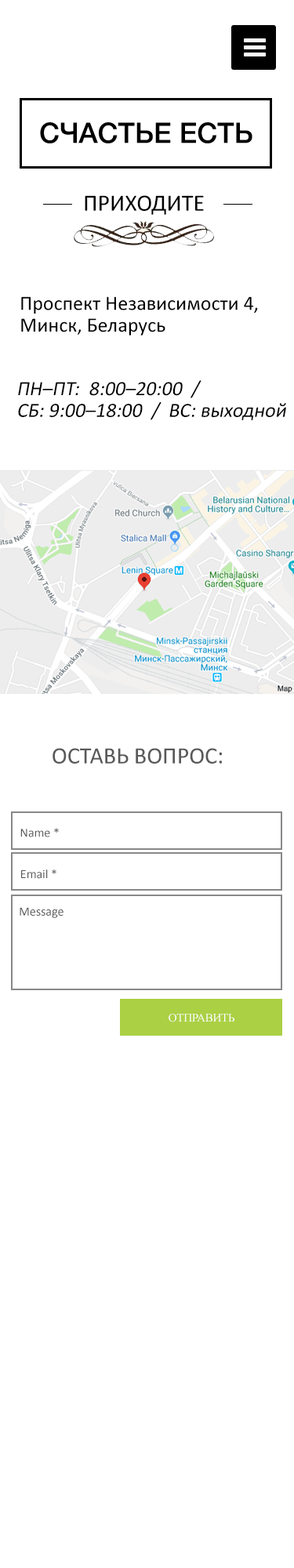
<style>
.page{position:relative;width:294px;height:1568px;background:#ffffff}
.page>*{position:absolute;margin:0}
.t1{font:28.2px "HelveticaNeueCyr-Medium";color:#000000;text-transform:uppercase}
.t2{font:23.5px "Calibri";color:#000000;text-transform:uppercase}
.t3{font:20.4px/21.8px "Calibri";color:#000000}
.t4{font:20.4px/21.8px "Calibri";color:#000000;font-style:italic}
.t5{font:23.5px "Calibri";color:#5a5959;text-transform:uppercase}
.t6{font:12.5px "Calibri";color:#5a5959}
.t7{font:11.5px "TimesNewRomanPSMT";color:#ffffff;text-transform:uppercase}
</style>
<div class="page">
<p class="t1" style="left:40px;top:122px;width:212px;height:21px">счастье есть</p>
<p class="t2" style="left:85px;top:195px;width:119px;height:20px">приходите</p>
<p class="t3" style="left:21px;top:296px;width:237px;height:40px">Проспект Независимости 4, Минск, Беларусь</p>
<p class="t4" style="left:18px;top:380px;width:268px;height:40px">ПН–ПТ:  8:00–20:00  /  <br>СБ: 9:00–18:00  /  ВС: выходной</p>
<p class="t5" style="left:53px;top:748px;width:169px;height:16px">Оставь вопрос:</p>
<p class="t6" style="left:20px;top:828px;width:39px;height:9px">Name *</p>
<p class="t6" style="left:21px;top:869px;width:35px;height:10px">Email *</p>
<p class="t6" style="left:20px;top:907px;width:44px;height:11px">Message</p>
<p class="t7" style="left:169px;top:1014px;width:65px;height:8px">отправить</p>
</div>
